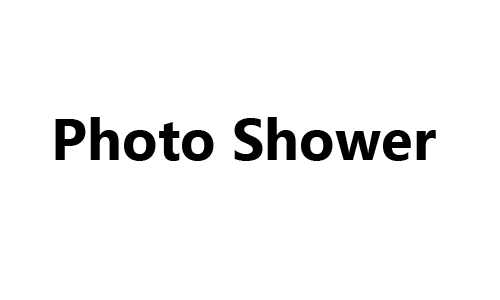
<style>
.page{position:relative;width:500px;height:300px;background:#ffffff}
.page>*{position:absolute;margin:0}
.t1{font:58.3px "NirmalaUI-Bold";color:#000000}
</style>
<div class="page">
<p class="t1" style="left:55px;top:117px;width:381px;height:44px">Photo Shower</p>
</div>
